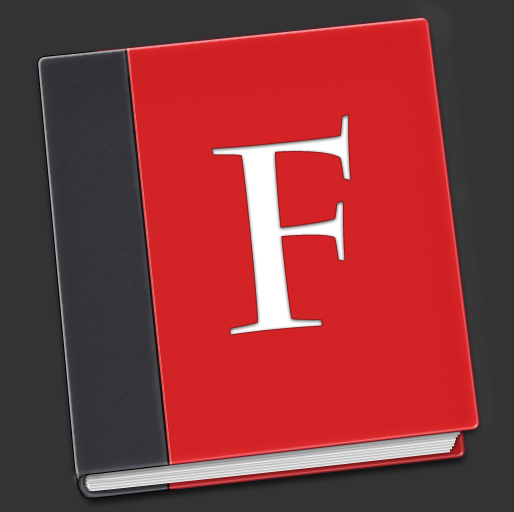
<style>
.page{position:relative;width:514px;height:512px;background:#333333}
.page>*{position:absolute;margin:0}
.t1{font:263.3px "CharlemagneStd-Bold";color:#ffffff}
</style>
<div class="page">
<p class="t1" style="left:212px;top:114px;width:139px;height:221px;rotate:-6deg">F</p>
</div>
